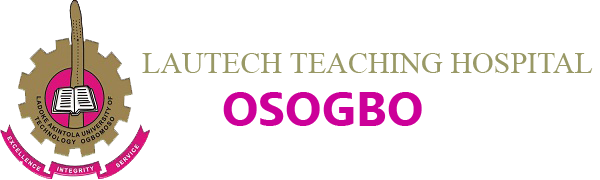
<style>
.page{position:relative;width:600px;height:180px;background:#ffffff}
.page>*{position:absolute;margin:0}
.t1{font:30px "IskoolaPota";color:#999966}
.t2{font:48px "Ebrima-Bold";color:#cc0099}
</style>
<div class="page">
<p class="t1" style="left:142px;top:53px;width:451px;height:21px">LAUTECH TEACHING HOSPITAL</p>
<p class="t2" style="left:223px;top:92px;width:199px;height:34px">OSOGBO</p>
</div>
